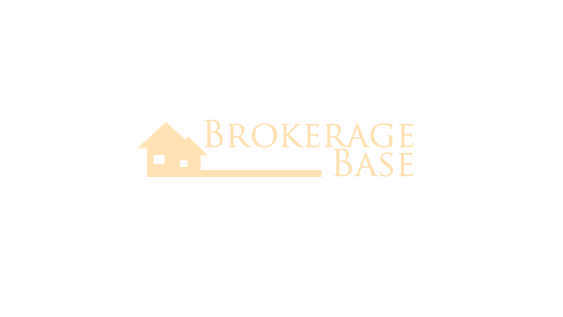
<style>
.page{position:relative;width:563px;height:317px;background:#ffffff}
.page>*{position:absolute;margin:0}
.t1{font:36px "TrajanPro-Regular";color:#ffe2b3}
</style>
<div class="page">
<p class="t1" style="left:204px;top:119px;width:210px;height:29px">Brokerage</p>
<p class="t1" style="left:333px;top:148px;width:80px;height:29px">Base</p>
</div>
